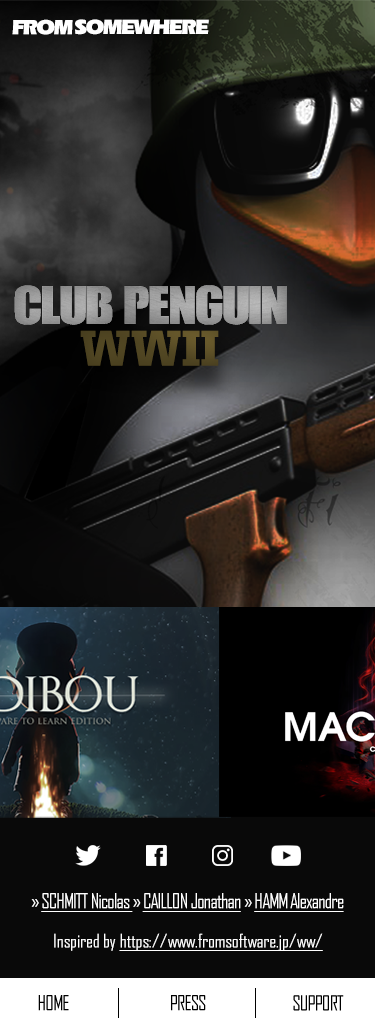
<style>
.page{position:relative;width:375px;height:1028px}
.page>*{position:absolute;margin:0}
.t1{font:21.4px "ErasITCbyBT-Ultra";letter-spacing:-0.075em;color:#ffffff}
.t2{font:50.8px "CallOfOpsDuty";letter-spacing:-0.025em;color:#9d9d9d}
.t3{font:50.8px "UnitedSerifReg-Black";letter-spacing:-0.01em;color:#514623}
.t4{font:20px "AgencyFB-Reg";letter-spacing:-0.05em;color:#ffffff;text-decoration:underline}
.t5{font:20px "AgencyFB-Reg";letter-spacing:-0.05em;color:#ffffff}
.t6{font:18px "AgencyFB-Reg";color:#ffffff;text-decoration:underline}
.t7{font:18px "AgencyFB-Reg";color:#ffffff}
.t8{font:20px "AgencyFB-Reg";letter-spacing:-0.05em;color:#000000}
</style>
<div class="page">
<p class="t1" style="left:12px;top:19px;width:61px;height:16px">FROM</p>
<p class="t1" style="left:75px;top:19px;width:134px;height:16px">SOMEWHERE</p>
<p class="t2" style="left:14px;top:285px;width:273px;height:40px">CLUB PENGUIN</p>
<p class="t3" style="left:80px;top:330px;width:139px;height:36px">WWII</p>
<p class="t4" style="left:31px;top:893px;width:313px;height:19px"><span class="t5">» </span>SCHMITT Nicolas <span class="t5">» </span>CAILLON Jonathan<span class="t5"> » </span>HAMM Alexandre</p>
<p class="t6" style="left:54px;top:933px;width:269px;height:18px"><span class="t7">Inspired by </span>https://www.fromsoftware.jp/ww/</p>
<p class="t8" style="left:38px;top:995px;width:31px;height:16px">HOME</p>
<p class="t8" style="left:171px;top:995px;width:35px;height:16px">PRESS</p>
<p class="t8" style="left:293px;top:995px;width:51px;height:16px">SUPPORT</p>
</div>
